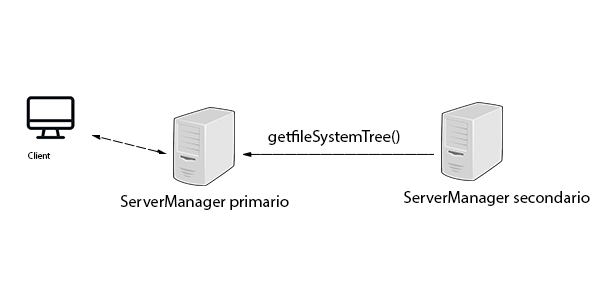
<style>
.page{position:relative;width:600px;height:300px;background:#ffffff}
.page>*{position:absolute;margin:0}
.t1{font:16.7px "MyriadPro-Regular";color:#000000}
.t2{font:9.1px "MyriadPro-Regular";color:#000000}
</style>
<div class="page">
<p class="t1" style="left:268px;top:130px;width:132px;height:16px">getfileSystemTree()</p>
<p class="t2" style="left:28px;top:152px;width:23px;height:7px">Client</p>
<p class="t1" style="left:120px;top:195px;width:169px;height:15px">ServerManager primario</p>
<p class="t1" style="left:404px;top:191px;width:186px;height:15px">ServerManager secondario</p>
</div>
